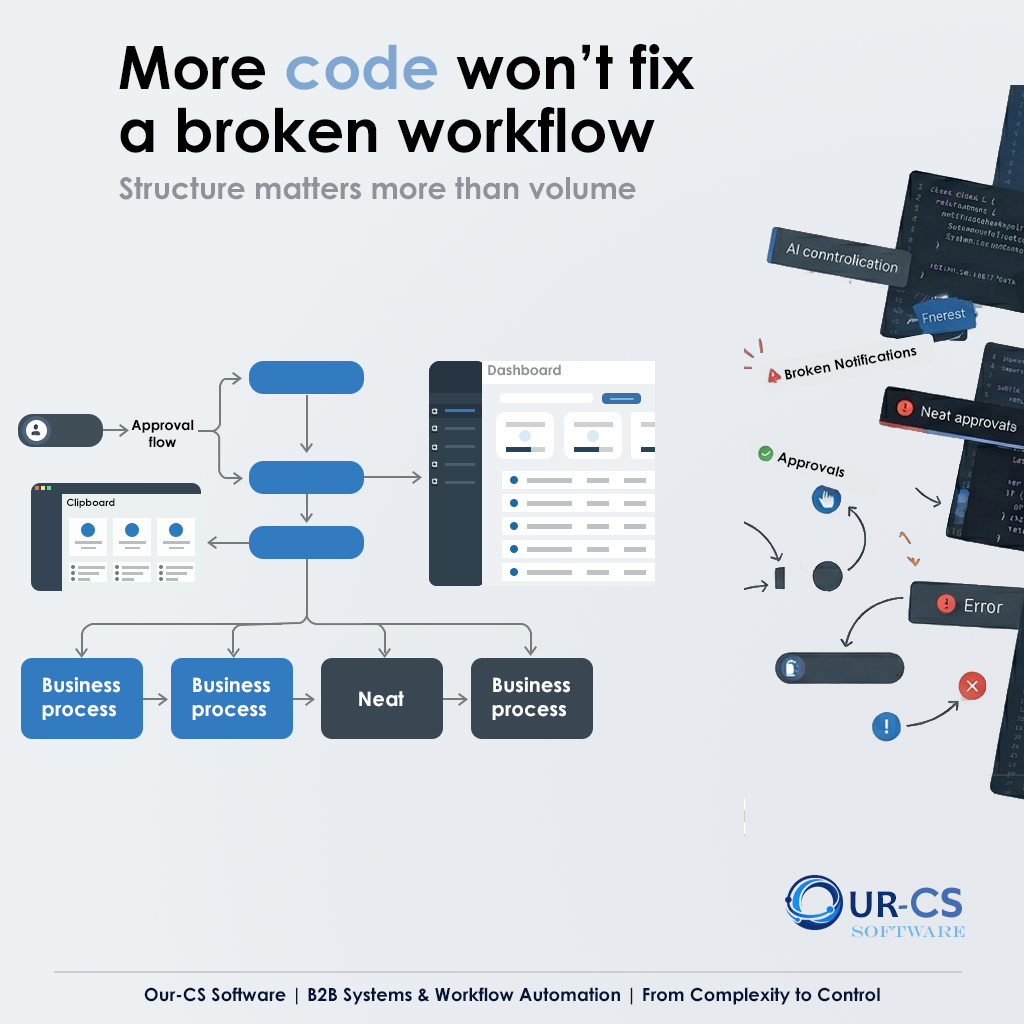
<style>
.page{position:relative;width:1024px;height:1024px}
.page>*{position:absolute;margin:0}
.t1{font:60px/63px "CenturyGothic-Bold";color:#000000}
.t2{font:60px/63px "CenturyGothic-Bold";color:#80a7d1}
.t3{font:30px "CenturyGothic-Bold";color:#8f9399}
.t4{font:14px "CenturyGothic-Bold";color:#8f9399}
.t5{font:14px "CenturyGothic-Bold";color:#000000}
.t6{font:20px "CenturyGothic-Bold";color:#ffffff}
.t7{font:40px "Candara-Bold";color:#0c2f6f}
.t8{font:40px "Candara-Bold";color:#416dad}
.t9{font:40px "CenturyGothic-Bold";color:#446db3}
.t10{font:40px "AzoSans-Bold";color:#446db3}
.t11{font:16px "EngraversMT";color:#72b5ec}
.t12{font:18px "CenturyGothic-Bold";color:#061536}
</style>
<div class="page">
<p class="t1" style="left:119px;top:44px;width:576px;height:109px">More <span class="t2">code</span> won’t fix<br>a broken workflow</p>
<p class="t3" style="left:119px;top:177px;width:517px;height:23px">Structure matters more than volume</p>
<p class="t4" style="left:488px;top:364px;width:73px;height:12px">Dashboard</p>
<p class="t5" style="left:131px;top:419px;width:63px;height:29px;text-align:center">Approval<br>flow</p>
<p class="t6" style="left:42px;top:677px;width:78px;height:43px">Business<br>process</p>
<p class="t6" style="left:192px;top:677px;width:78px;height:43px">Business<br>process</p>
<p class="t6" style="left:492px;top:677px;width:78px;height:43px">Business<br>process</p>
<p class="t6" style="left:359px;top:691px;width:45px;height:16px">Neat</p>
<p class="t7" style="left:850px;top:887px;width:112px;height:31px">UR<span class="t8">-</span><span class="t9">C</span><span class="t10">S</span></p>
<p class="t11" style="left:852px;top:925px;width:113px;height:13px">Software</p>
<p class="t12" style="left:144px;top:987px;width:736px;height:18px">Our-CS Software | B2B Systems &amp; Workflow Automation | From Complexity to Control</p>
</div>
